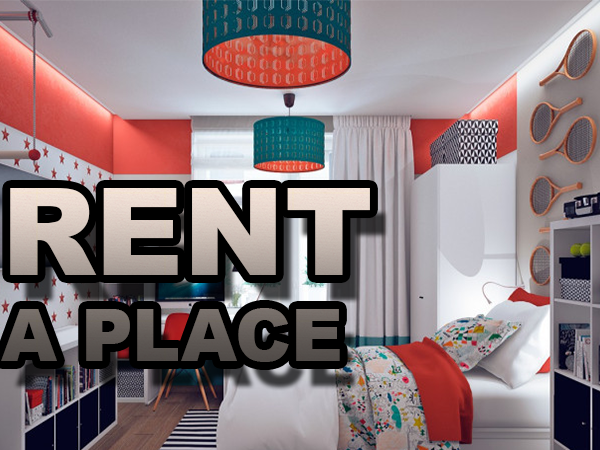
<style>
.page{position:relative;width:600px;height:450px}
.page>*{position:absolute;margin:0}
.t1{font:72px "Arial-Black"}
.t2{font:122px "Arial-Black"}
</style>
<div class="page">
<p class="t1" style="left:1px;top:188px;width:369px;height:174px"><span class="t2">RENT<br></span>A PLACE</p>
</div>
